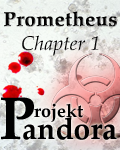
<style>
.page{position:relative;width:120px;height:150px}
.page>*{position:absolute;margin:0}
.t1{font:20px "PalatinoLinotype-Bold";color:#010000;font-weight:bold}
.t2{font:20px "PalatinoLinotype-Italic";color:#010000}
.t3{font:60px "PalatinoLinotype-Bold";color:#000000}
.t4{font:18px/22px "PalatinoLinotype-Bold";color:#000000}
.t5{font:24px/22px "PalatinoLinotype-Bold";color:#000000}
.t6{font:30px/22px "PalatinoLinotype-Bold";color:#000000}
</style>
<div class="page">
<p class="t1" style="left:4px;top:11px;width:113px;height:45px;text-align:center">Prometheus<br><span class="t2">Chapter 1</span></p>
<p class="t3" style="left:1px;top:97px;width:33px;height:43px">P</p>
<p class="t4" style="left:23px;top:103px;width:94px;height:37px"><span class="t5">  </span>rojekt<br><span class="t6">andora</span></p>
</div>
